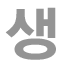
<style>
.page{position:relative;width:63px;height:67px;background:#ffffff}
.page>*{position:absolute;margin:0}
.t1{font:58.3px "YDIYGO350";color:#949494}
</style>
<div class="page">
<p class="t1" style="left:5px;top:7px;width:51px;height:53px">생</p>
</div>
